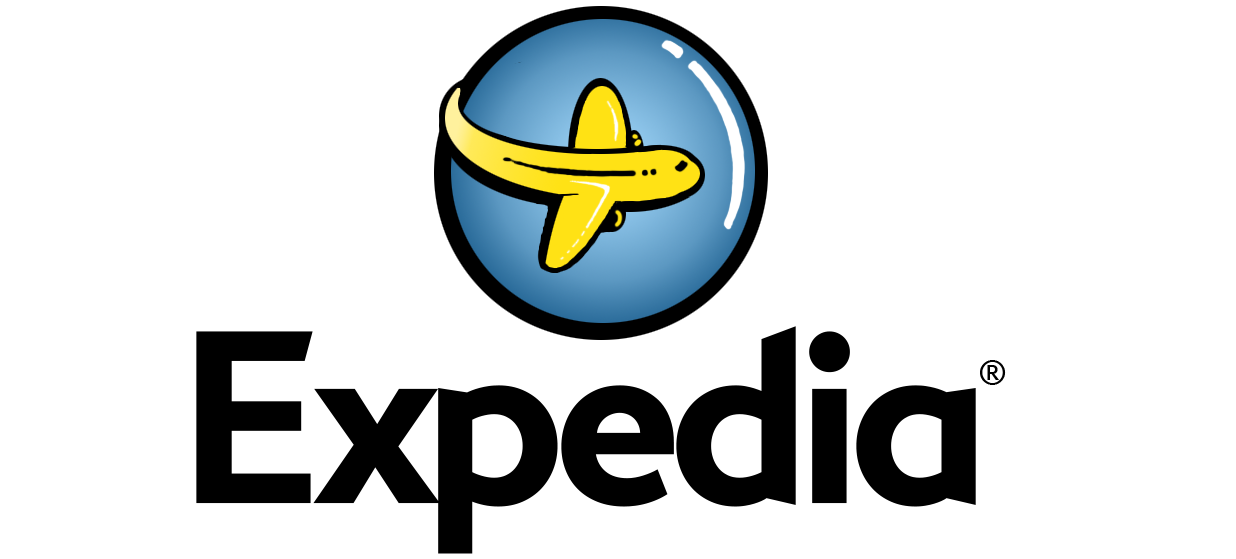
<style>
.page{position:relative;width:1236px;height:559px;background:#ffffff}
.page>*{position:absolute;margin:0}
.t1{font:245px "ExpediaSans-Bold";letter-spacing:-0.055em;color:#000000}
.t2{font:60px "ExpediaSans-Bold";letter-spacing:-0.055em;color:#000000}
</style>
<div class="page">
<p class="t1" style="left:196px;top:326px;width:810px;height:228px">Expedia<span class="t2">®</span></p>
</div>
